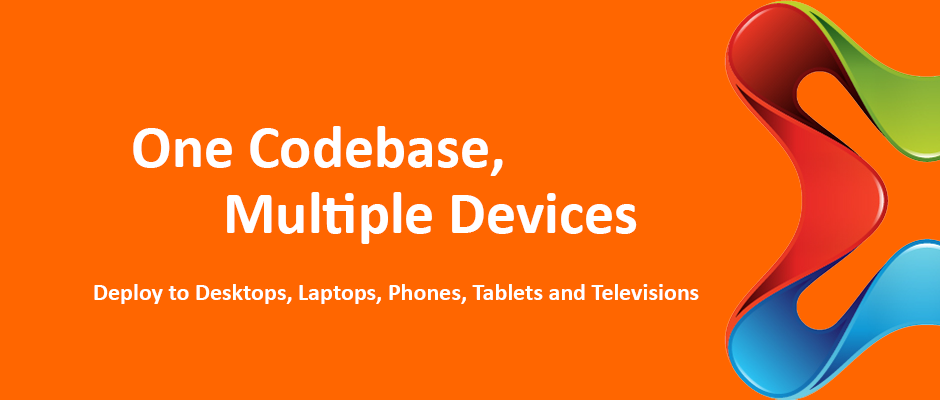
<style>
.page{position:relative;width:940px;height:400px;background:#ff6600}
.page>*{position:absolute;margin:0}
.t1{font:60px "Calibri-Bold";color:#ffffff}
.t2{font:24px "Calibri-Bold";color:#ffffff}
</style>
<div class="page">
<p class="t1" style="left:133px;top:126px;width:370px;height:50px">One Codebase,</p>
<p class="t1" style="left:227px;top:192px;width:410px;height:52px">Multiple Devices</p>
<p class="t2" style="left:94px;top:284px;width:605px;height:20px">Deploy to Desktops, Laptops, Phones, Tablets and Televisions</p>
</div>
